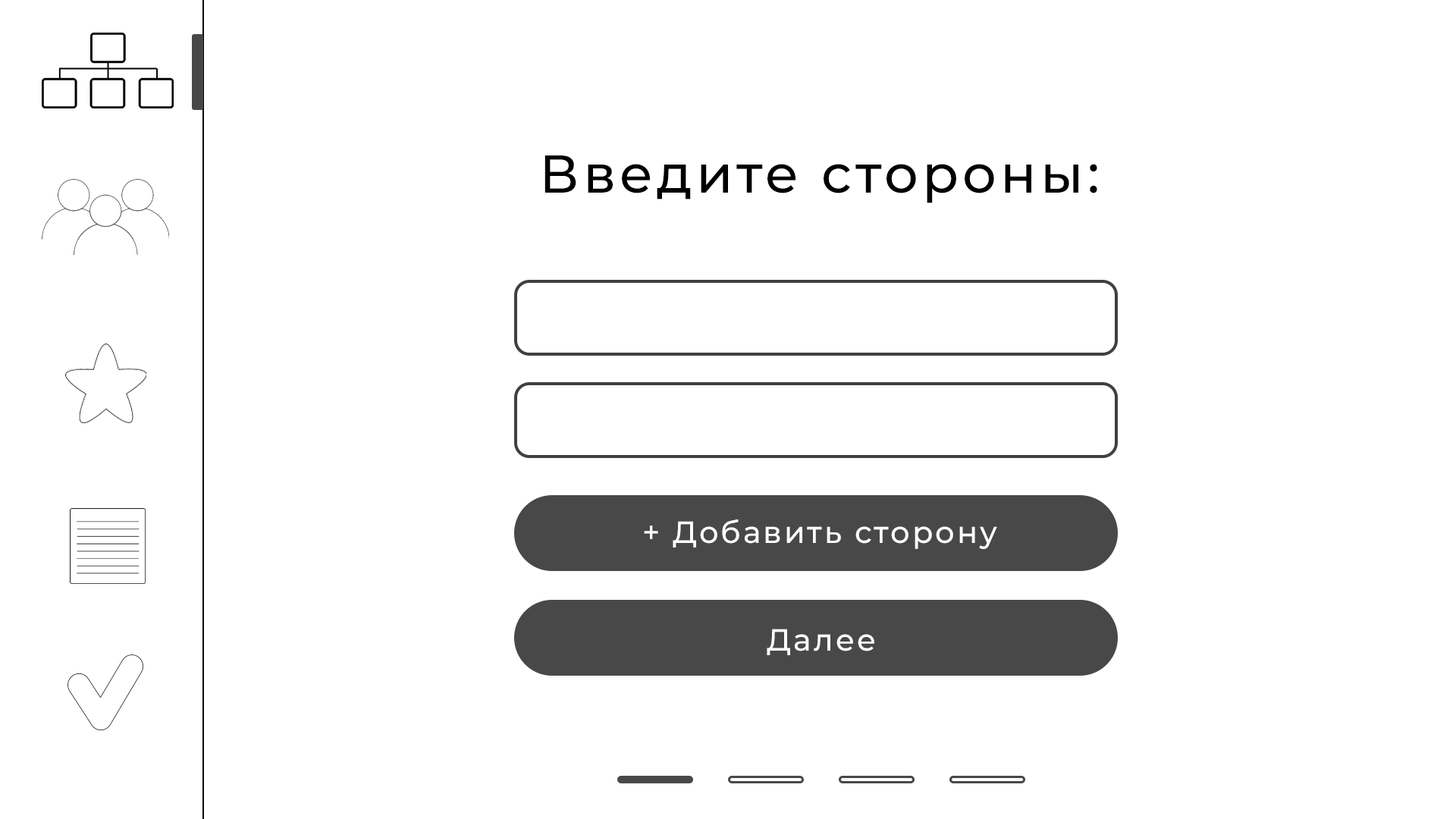
<style>
.page{position:relative;width:1456px;height:819px;background:#ffffff}
.page>*{position:absolute;margin:0}
.t1{font:53.1px "Montserrat-Medium";letter-spacing:0.075em;color:#000000}
.t2{font:30.3px "Montserrat-Medium";letter-spacing:0.075em;color:#ffffff}
</style>
<div class="page">
<p class="t1" style="left:544px;top:155px;width:553px;height:48px">Введите стороны:</p>
<p class="t2" style="left:644px;top:519px;width:353px;height:30px">+ Добавить сторону</p>
<p class="t2" style="left:767px;top:629px;width:107px;height:26px">Далее</p>
</div>
